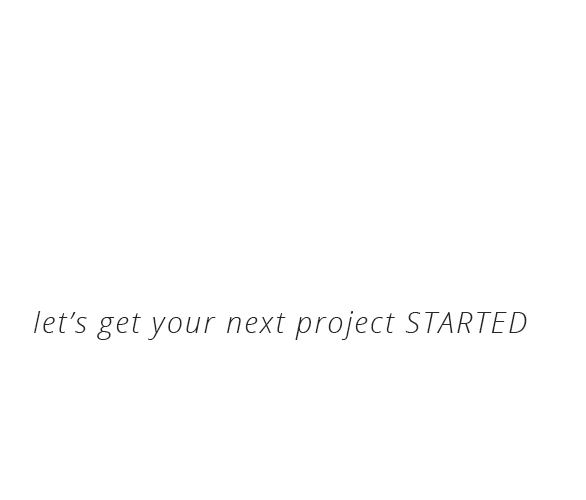
<style>
.page{position:relative;width:586px;height:500px;background:#ffffff}
.page>*{position:absolute;margin:0}
.t1{font:29.2px "OpenSansLight-Italic";letter-spacing:0.075em;color:#262626}
</style>
<div class="page">
<p class="t1" style="left:34px;top:311px;width:493px;height:29px">let’s get your next project STARTED</p>
</div>
